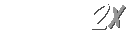
<style>
.page{position:relative;width:128px;height:32px;background:#ffffff}
.page>*{position:absolute;margin:0}
.t1{font:45px "DomDiagonalBT-Regular";letter-spacing:0.075em;color:#ffffff}
.t2{font:29.7px "DomDiagonalBT-Regular";letter-spacing:0.075em;color:#969696}
.t3{font:29.7px "DomDiagonalBT-Regular";letter-spacing:0.075em}
</style>
<div class="page">
<p class="t1" style="left:91px;top:2px;width:19px;height:28px">2</p>
<p class="t2" style="left:108px;top:5px;width:17px;height:23px">X</p>
<p class="t3" style="left:109px;top:6px;width:17px;height:23px">X</p>
</div>
